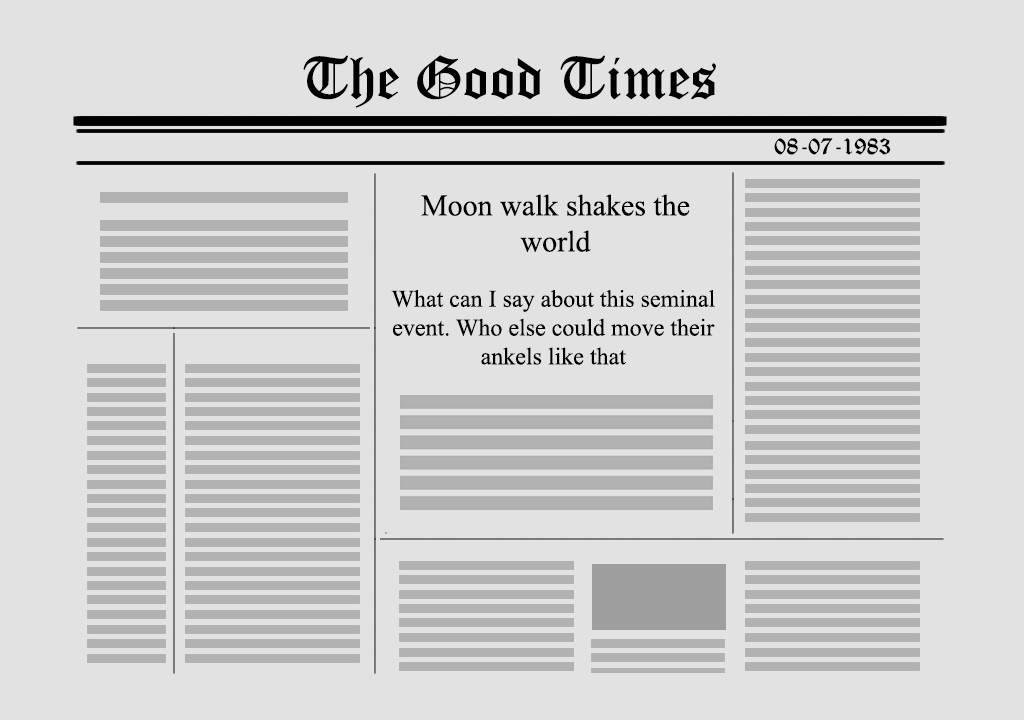
<style>
.page{position:relative;width:1024px;height:720px;background:#e2e2e2}
.page>*{position:absolute;margin:0}
.t1{font:60px "OldEnglishTextMT";color:#000000}
.t2{font:24px "OldEnglishTextMT";color:#000000}
.t3{font:30px "TimesNewRomanPSMT";color:#000000}
.t4{font:24px "TimesNewRomanPSMT";color:#000000}
</style>
<div class="page">
<p class="t1" style="left:303px;top:55px;width:413px;height:53px">The Good Times</p>
<p class="t2" style="left:774px;top:138px;width:117px;height:17px">08-07-1983</p>
<p class="t3" style="left:421px;top:194px;width:269px;height:58px;text-align:center">Moon walk shakes the world</p>
<p class="t4" style="left:391px;top:290px;width:324px;height:75px;text-align:center">What can I say about this seminal event. Who else could move their ankels like that</p>
</div>
